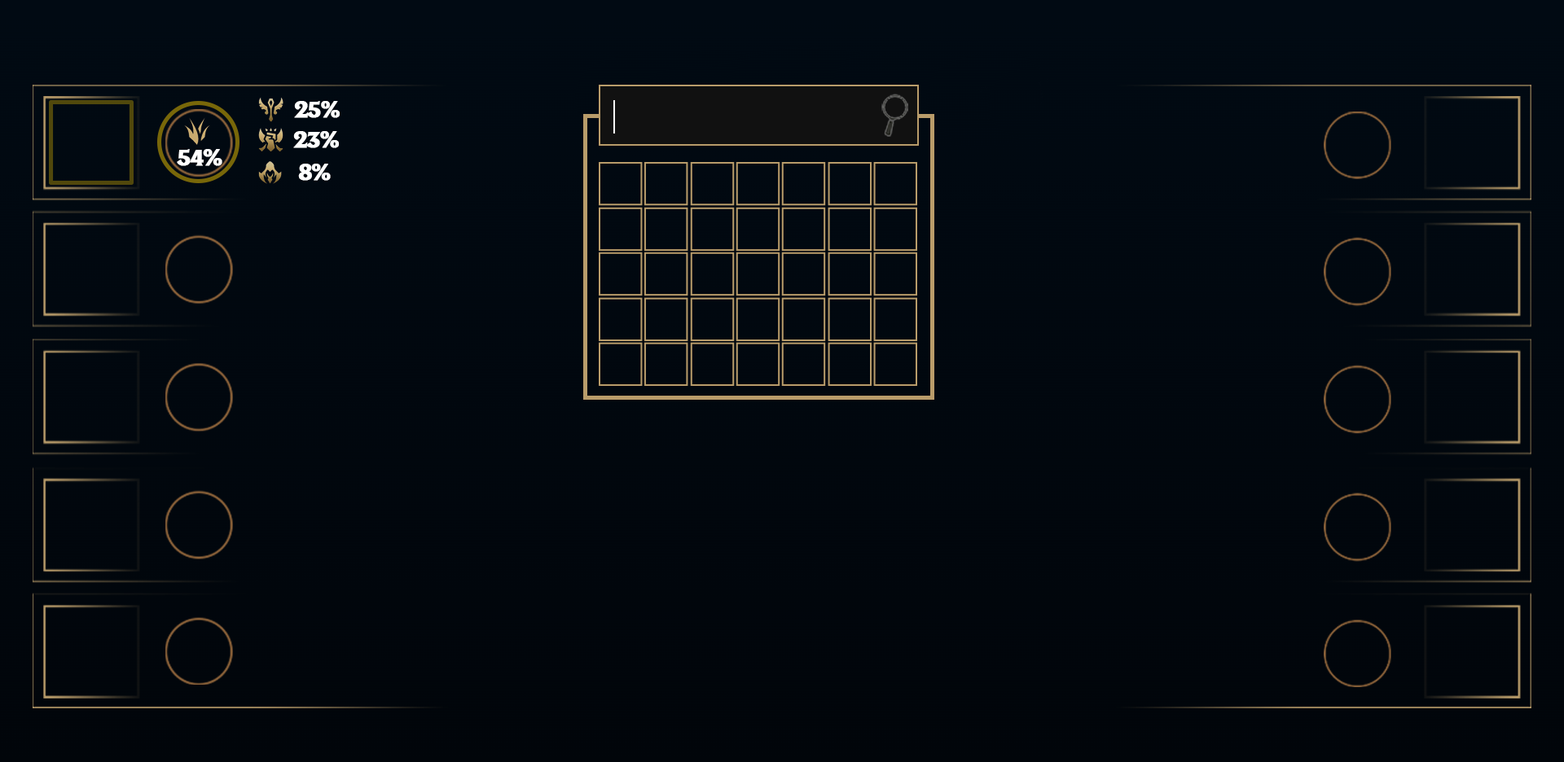
<style>
.page{position:relative;width:1564px;height:762px}
.page>*{position:absolute;margin:0}
.t1{font:24px "BeaufortforLOL-Heavy";letter-spacing:-0.06em;color:#ffffff;font-weight:bold}
</style>
<div class="page">
<p class="t1" style="left:294px;top:101px;width:46px;height:17px">25%</p>
<p class="t1" style="left:293px;top:131px;width:46px;height:17px">23%</p>
<p class="t1" style="left:177px;top:149px;width:45px;height:17px">54%</p>
<p class="t1" style="left:298px;top:164px;width:33px;height:17px">8%</p>
</div>
